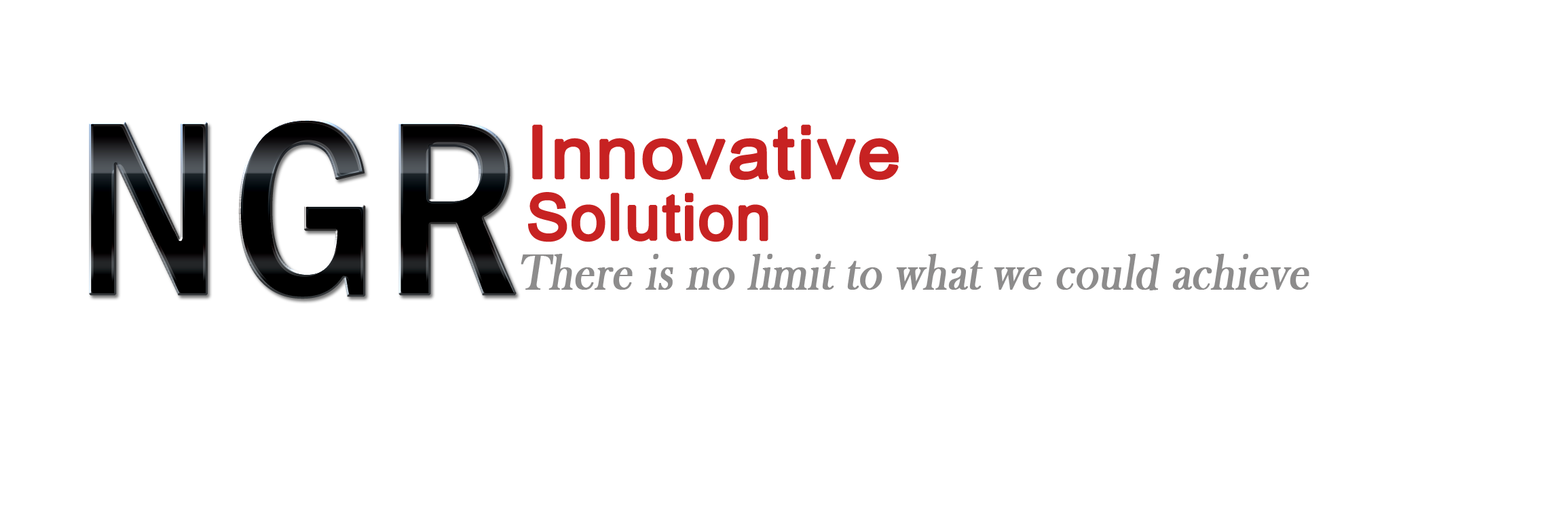
<style>
.page{position:relative;width:1568px;height:515px;background:#ffffff}
.page>*{position:absolute;margin:0}
.t1{font:255.9px "FranklinGothic-MediumCond";font-weight:bold}
.t2{font:101.1px "Utsaah";color:#c72222;font-weight:bold;scale:1.05 1}
.t3{font:88.5px "Utsaah";color:#c72222;font-weight:bold}
.t4{font:51.5px "BaskOldFace";color:#8d8c8c;font-weight:bold;font-style:italic;scale:0.86 1}
</style>
<div class="page">
<p class="t1" style="left:89px;top:118px;width:428px;height:181px">NGR</p>
<p class="t2" style="left:532px;top:124px;width:367px;height:57px">Innovative</p>
<p class="t3" style="left:528px;top:192px;width:240px;height:50px">Solution</p>
<p class="t4" style="left:521px;top:254px;width:788px;height:37px">There is no limit to what we could achieve</p>
</div>
